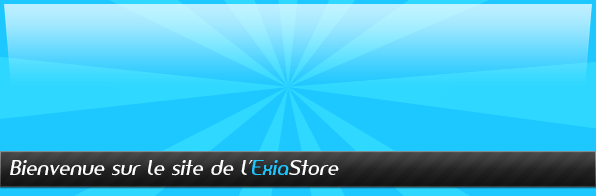
<style>
.page{position:relative;width:596px;height:196px;background:#1dc7ff}
.page>*{position:absolute;margin:0}
.t1{font:20px "AmerikaSans";color:#ffffff;font-style:italic}
.t2{font:20px "AmerikaSans";color:#1dc7ff;font-style:italic}
</style>
<div class="page">
<p class="t1" style="left:10px;top:160px;width:329px;height:16px">Bienvenue sur le site de l’<span class="t2">Exia</span>Store</p>
</div>
